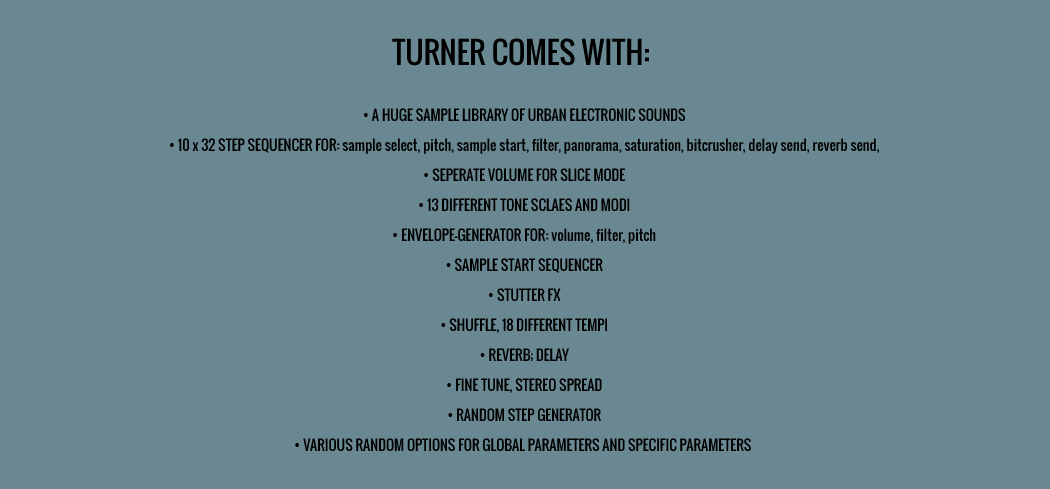
<style>
.page{position:relative;width:1050px;height:489px;background:#698891}
.page>*{position:absolute;margin:0}
.t1{font:14px/30px "Oswald-Regular";color:#000000}
.t2{font:30px/26px "Oswald-Regular";color:#000000}
</style>
<div class="page">
<p class="t1" style="left:170px;top:38px;width:709px;height:413px;text-align:center"><span class="t2">TURNER COMES WITH: <br><br></span>• A HUGE SAMPLE LIBRARY OF URBAN ELECTRONIC SOUNDS<br>• 10 x 32 STEP SEQUENCER FOR: sample select, pitch, sample start, filter, panorama, saturation, bitcrusher, delay send, reverb send,<br>• SEPERATE VOLUME FOR SLICE MODE<br>• 13 DIFFERENT TONE SCLAES AND MODI<br>• ENVELOPE-GENERATOR FOR: volume, filter, pitch<br>• SAMPLE START SEQUENCER<br>• STUTTER FX<br>• SHUFFLE, 18 DIFFERENT TEMPI<br>• REVERB; DELAY<br>• FINE TUNE, STEREO SPREAD<br>• RANDOM STEP GENERATOR<br>• VARIOUS RANDOM OPTIONS FOR GLOBAL PARAMETERS AND SPECIFIC PARAMETERS</p>
</div>
